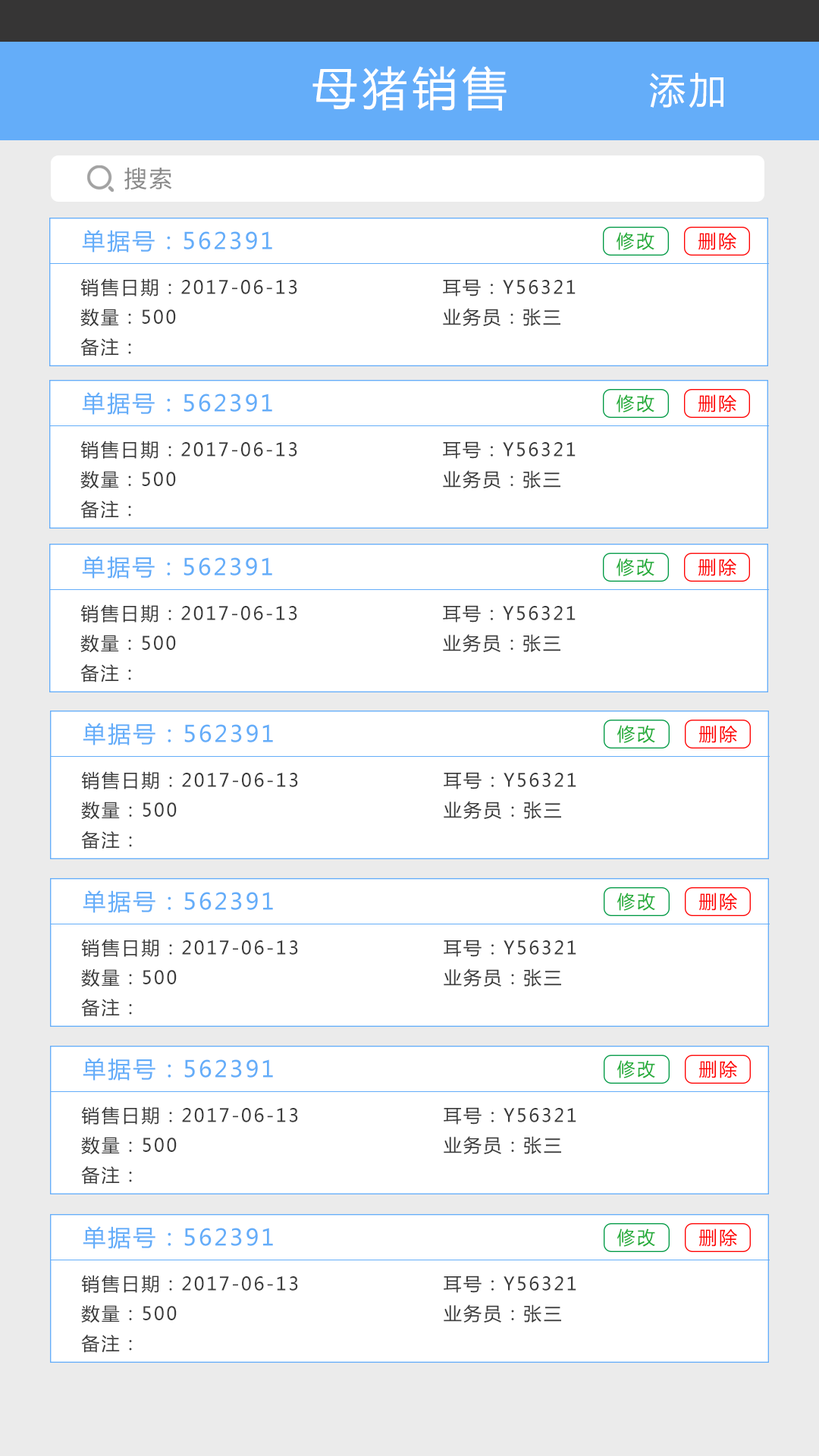
<style>
.page{position:relative;width:819px;height:1456px;background:#ffffff}
.page>*{position:absolute;margin:0}
.t1{font:45.5px "MicrosoftYaHei";letter-spacing:0.1em;color:#ffffff}
.t2{font:36.4px "MicrosoftYaHei";letter-spacing:0.1em;color:#ffffff}
.t3{font:22.7px "MicrosoftYaHei";letter-spacing:0.1em;color:#898989}
.t4{font:22.7px "MicrosoftYaHei";letter-spacing:0.1em;color:#64adf9}
.t5{font:18.2px "MicrosoftYaHei";letter-spacing:0.1em;color:#22ac38}
.t6{font:18.2px "MicrosoftYaHei";letter-spacing:0.1em;color:#fe0000}
.t7{font:18.2px "MicrosoftYaHei";letter-spacing:0.1em;color:#3b3b3b}
</style>
<div class="page">
<p class="t1" style="left:312px;top:66px;width:195px;height:45px">母猪销售</p>
<p class="t2" style="left:649px;top:73px;width:74px;height:35px">添加</p>
<p class="t3" style="left:124px;top:168px;width:48px;height:22px">搜索</p>
<p class="t4" style="left:82px;top:230px;width:190px;height:23px">单据号：562391</p>
<p class="t5" style="left:617px;top:232px;width:37px;height:18px">修改</p>
<p class="t6" style="left:698px;top:232px;width:38px;height:18px">删除</p>
<p class="t7" style="left:80px;top:278px;width:217px;height:19px">销售日期：2017-06-13</p>
<p class="t7" style="left:443px;top:279px;width:133px;height:18px">耳号：Y56321</p>
<p class="t7" style="left:80px;top:309px;width:96px;height:18px">数量：500</p>
<p class="t7" style="left:443px;top:308px;width:117px;height:18px">业务员：张三</p>
<p class="t7" style="left:80px;top:338px;width:51px;height:18px">备注：</p>
<p class="t4" style="left:82px;top:392px;width:190px;height:23px">单据号：562391</p>
<p class="t5" style="left:617px;top:394px;width:37px;height:19px">修改</p>
<p class="t6" style="left:698px;top:394px;width:38px;height:19px">删除</p>
<p class="t7" style="left:80px;top:441px;width:217px;height:18px">销售日期：2017-06-13</p>
<p class="t7" style="left:443px;top:441px;width:133px;height:18px">耳号：Y56321</p>
<p class="t7" style="left:80px;top:471px;width:96px;height:18px">数量：500</p>
<p class="t7" style="left:443px;top:470px;width:117px;height:18px">业务员：张三</p>
<p class="t7" style="left:80px;top:500px;width:51px;height:19px">备注：</p>
<p class="t4" style="left:82px;top:556px;width:190px;height:23px">单据号：562391</p>
<p class="t5" style="left:617px;top:558px;width:37px;height:18px">修改</p>
<p class="t6" style="left:698px;top:558px;width:38px;height:18px">删除</p>
<p class="t7" style="left:80px;top:604px;width:217px;height:19px">销售日期：2017-06-13</p>
<p class="t7" style="left:443px;top:605px;width:133px;height:18px">耳号：Y56321</p>
<p class="t7" style="left:80px;top:635px;width:96px;height:18px">数量：500</p>
<p class="t7" style="left:443px;top:634px;width:117px;height:18px">业务员：张三</p>
<p class="t7" style="left:80px;top:664px;width:51px;height:18px">备注：</p>
<p class="t4" style="left:83px;top:723px;width:190px;height:22px">单据号：562391</p>
<p class="t5" style="left:617px;top:725px;width:38px;height:18px">修改</p>
<p class="t6" style="left:699px;top:725px;width:38px;height:18px">删除</p>
<p class="t7" style="left:81px;top:771px;width:217px;height:18px">销售日期：2017-06-13</p>
<p class="t7" style="left:444px;top:772px;width:132px;height:17px">耳号：Y56321</p>
<p class="t7" style="left:81px;top:802px;width:96px;height:18px">数量：500</p>
<p class="t7" style="left:444px;top:801px;width:117px;height:18px">业务员：张三</p>
<p class="t7" style="left:81px;top:831px;width:51px;height:18px">备注：</p>
<p class="t4" style="left:83px;top:890px;width:190px;height:23px">单据号：562391</p>
<p class="t5" style="left:617px;top:893px;width:38px;height:18px">修改</p>
<p class="t6" style="left:699px;top:893px;width:38px;height:18px">删除</p>
<p class="t7" style="left:81px;top:939px;width:217px;height:18px">销售日期：2017-06-13</p>
<p class="t7" style="left:444px;top:940px;width:132px;height:17px">耳号：Y56321</p>
<p class="t7" style="left:81px;top:969px;width:96px;height:18px">数量：500</p>
<p class="t7" style="left:444px;top:968px;width:117px;height:19px">业务员：张三</p>
<p class="t7" style="left:81px;top:999px;width:51px;height:18px">备注：</p>
<p class="t4" style="left:83px;top:1058px;width:190px;height:23px">单据号：562391</p>
<p class="t5" style="left:617px;top:1060px;width:38px;height:18px">修改</p>
<p class="t6" style="left:699px;top:1060px;width:38px;height:18px">删除</p>
<p class="t7" style="left:81px;top:1106px;width:217px;height:19px">销售日期：2017-06-13</p>
<p class="t7" style="left:444px;top:1107px;width:132px;height:18px">耳号：Y56321</p>
<p class="t7" style="left:81px;top:1137px;width:96px;height:18px">数量：500</p>
<p class="t7" style="left:444px;top:1136px;width:117px;height:18px">业务员：张三</p>
<p class="t7" style="left:81px;top:1166px;width:51px;height:19px">备注：</p>
<p class="t4" style="left:83px;top:1226px;width:190px;height:23px">单据号：562391</p>
<p class="t5" style="left:617px;top:1228px;width:38px;height:19px">修改</p>
<p class="t6" style="left:699px;top:1228px;width:38px;height:19px">删除</p>
<p class="t7" style="left:81px;top:1275px;width:217px;height:18px">销售日期：2017-06-13</p>
<p class="t7" style="left:444px;top:1275px;width:132px;height:18px">耳号：Y56321</p>
<p class="t7" style="left:81px;top:1305px;width:96px;height:18px">数量：500</p>
<p class="t7" style="left:444px;top:1304px;width:117px;height:19px">业务员：张三</p>
<p class="t7" style="left:81px;top:1335px;width:51px;height:18px">备注：</p>
</div>
